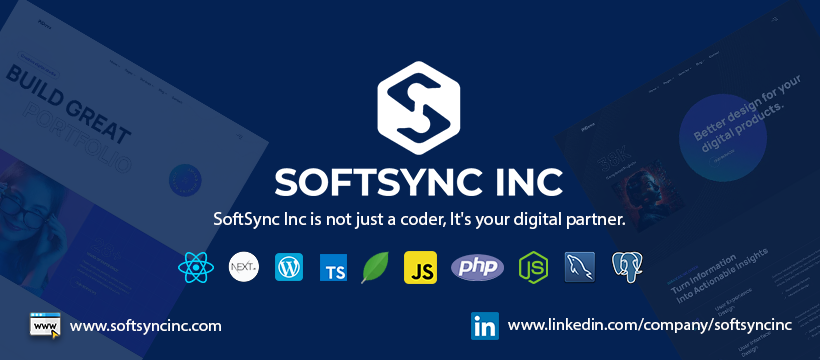
<style>
.page{position:relative;width:820px;height:360px;background:#042253}
.page>*{position:absolute;margin:0}
.t1{font:18.2px "MyriadPro-Regular";color:#fffefe}
.t2{font:16.7px "MyriadPro-Regular";color:#fffefe}
</style>
<div class="page">
<p class="t1" style="left:214px;top:212px;width:411px;height:17px">SoftSync Inc is not just a coder, It's your digital partner.</p>
<p class="t2" style="left:508px;top:318px;width:284px;height:16px">www.linkedin.com/company/softsyncinc</p>
<p class="t2" style="left:70px;top:319px;width:151px;height:16px">www.softsyncinc.com</p>
</div>
